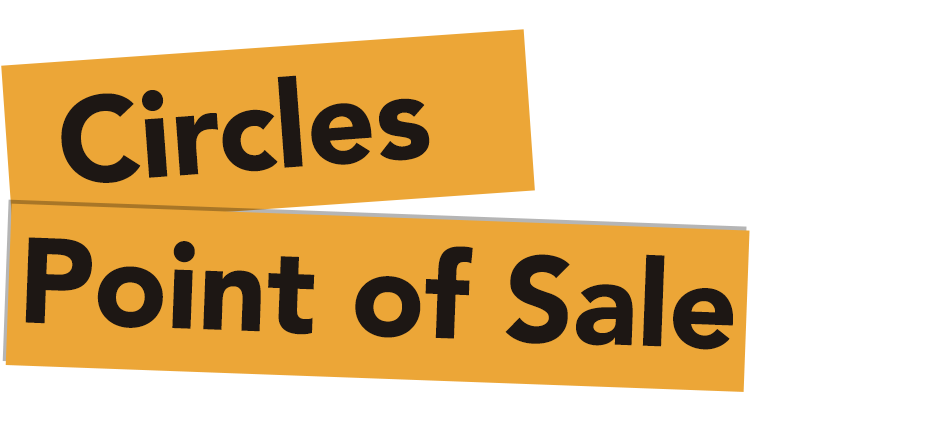
<style>
.page{position:relative;width:940px;height:443px;background:#ffffff}
.page>*{position:absolute;margin:0}
.t1{font:120px "Avenir-Black";color:#1d1714}
</style>
<div class="page">
<p class="t1" style="left:61px;top:75px;width:369px;height:108px;rotate:-4deg">Circles</p>
<p class="t1" style="left:25px;top:237px;width:708px;height:113px;rotate:2deg">Point of Sale</p>
</div>
